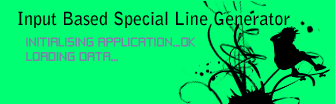
<style>
.page{position:relative;width:335px;height:104px;background:#00ff72}
.page>*{position:absolute;margin:0}
.t1{font:18px "BellGothicStd-Bold";color:#000000}
.t2{font:12px "ZeroThrees";color:#7f7fab}
</style>
<div class="page">
<p class="t1" style="left:18px;top:11px;width:272px;height:17px">Input Based Special Line Generator</p>
<p class="t2" style="left:26px;top:37px;width:170px;height:25px">INITIALISING APPLICATION...OK<br>LOADING DATA...</p>
</div>
